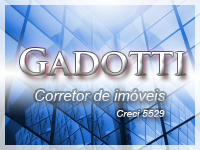
<style>
.page{position:relative;width:200px;height:150px}
.page>*{position:absolute;margin:0}
.t1{font:15px "Arial-ItalicMT";color:#ffffff}
.t2{font:10px "Arial-ItalicMT";color:#ffffff}
</style>
<div class="page">
<p class="t1" style="left:35px;top:90px;width:130px;height:11px">Corretor de imóveis</p>
<p class="t2" style="left:116px;top:110px;width:49px;height:7px">Creci 5529</p>
</div>
